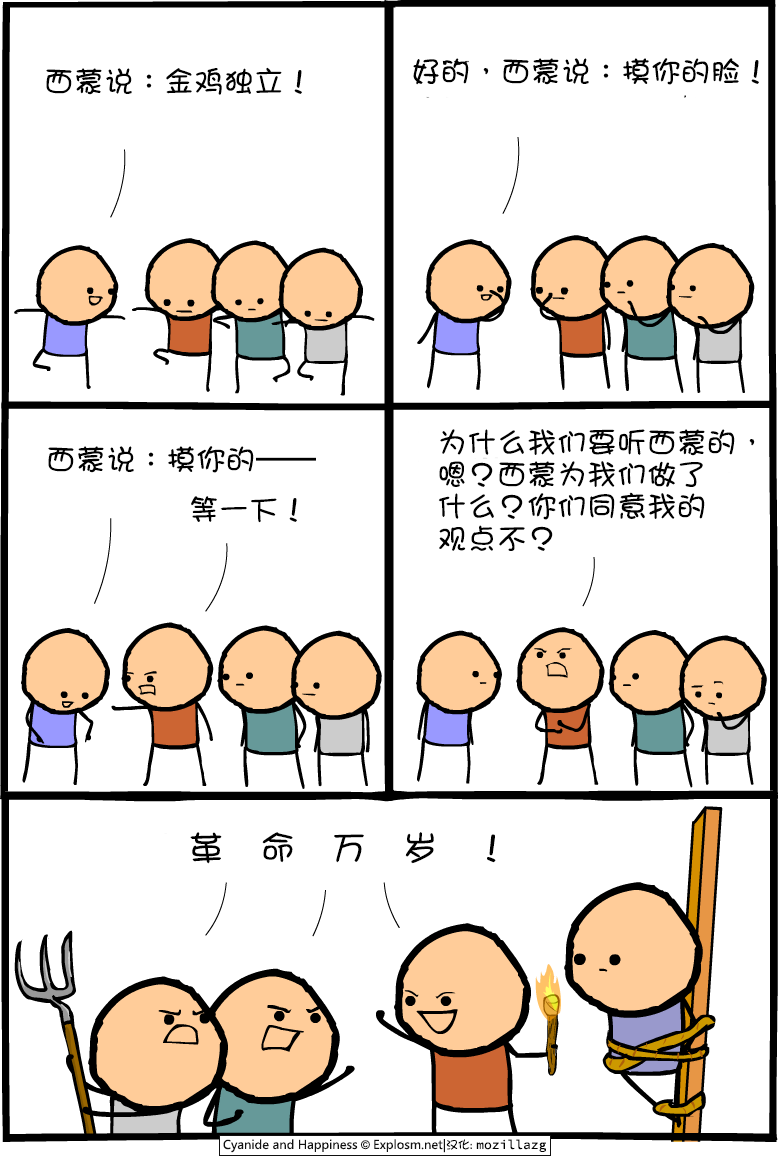
<style>
.page{position:relative;width:782px;height:1160px;background:#ffffff}
.page>*{position:absolute;margin:0}
.t1{font:30px "DFGirl";color:#000000}
.t2{font:30px/32px "DFGirl";color:#000000}
.t3{font:35px "DFGirl";letter-spacing:1.04em;color:#000000}
</style>
<div class="page">
<p class="t1" style="left:413px;top:58px;width:346px;height:27px">好的，西蒙说：摸你的脸！</p>
<p class="t1" style="left:46px;top:67px;width:256px;height:28px">西蒙说：金鸡独立！</p>
<p class="t2" style="left:438px;top:429px;width:317px;height:122px">为什么我们要听西蒙的，<br>嗯？西蒙为我们做了<br>什么？你们同意我的<br>观点不？</p>
<p class="t1" style="left:48px;top:446px;width:268px;height:27px">西蒙说：摸你的——</p>
<p class="t1" style="left:191px;top:496px;width:106px;height:27px">等一下！</p>
<p class="t3" style="left:190px;top:832px;width:306px;height:32px">革命万岁！</p>
</div>
